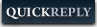
<style>
.page{position:relative;width:97px;height:27px}
.page>*{position:absolute;margin:0}
.t1{font:14px "ArnoPro-Bold";color:#f1f1f1}
.t2{font:14px "ArnoPro-Bold";color:#afb9c4}
</style>
<div class="page">
<p class="t1" style="left:6px;top:7px;width:86px;height:12px">QUICK<span class="t2">REPLY</span></p>
</div>
